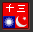
<style>
.page{position:relative;width:33px;height:32px;background:#f20000}
.page>*{position:absolute;margin:0}
.t1{font:10.4px "SimSun";color:#ffffff}
</style>
<div class="page">
<p class="t1" style="left:6px;top:4px;width:19px;height:8px">十三</p>
</div>
